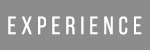
<style>
.page{position:relative;width:150px;height:50px;background:#8c8c8c}
.page>*{position:absolute;margin:0}
.t1{font:25px "BebasNeueRegular";letter-spacing:0.2em;color:#ffffff}
</style>
<div class="page">
<p class="t1" style="left:8px;top:16px;width:134px;height:19px">experience</p>
</div>
